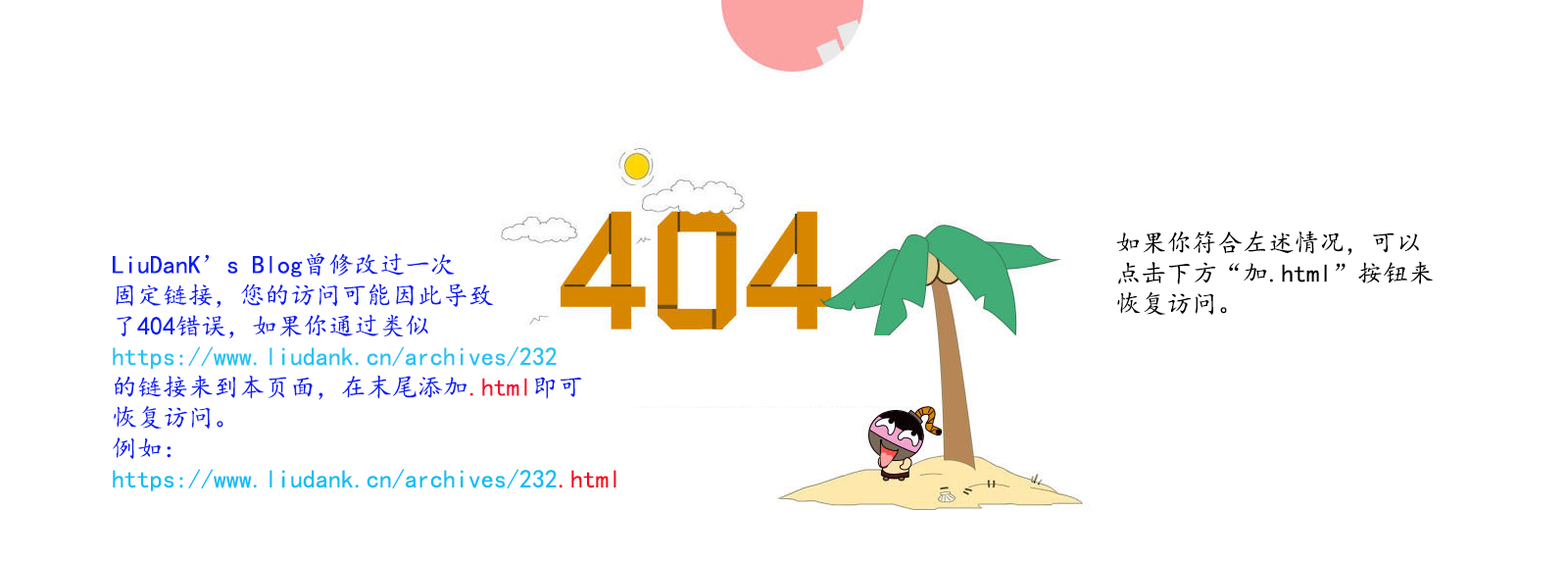
<style>
.page{position:relative;width:1568px;height:562px;background:#ffffff}
.page>*{position:absolute;margin:0}
.t1{font:25.5px "KaiTi";color:#000000}
.t2{font:25.5px "KaiTi";color:#0c1df3}
.t3{font:25.5px "KaiTi";color:#25c3f4}
.t4{font:25.5px "KaiTi";color:#f30c32}
.t5{font:25.5px "KaiTi";color:#0cbff3}
.t6{font:25.5px "KaiTi";color:#f60719}
</style>
<div class="page">
<p class="t1" style="left:1116px;top:230px;width:317px;height:85px">如果你符合左述情况，可以<br>点击下方“加.html”按钮来<br>恢复访问。</p>
<p class="t2" style="left:113px;top:252px;width:503px;height:239px">LiuDanK’s Blog曾修改过一次<br>固定链接，您的访问可能因此导致<br>了404错误，如果你通过类似<br><span class="t3">https://www.liudank.cn/archives/232<br></span>的链接来到本页面，在末尾添加<span class="t4">.html</span>即可<br>恢复访问。<br>例如：<br><span class="t5">https://www.liudank.cn/archives/232</span><span class="t6">.html</span></p>
</div>
